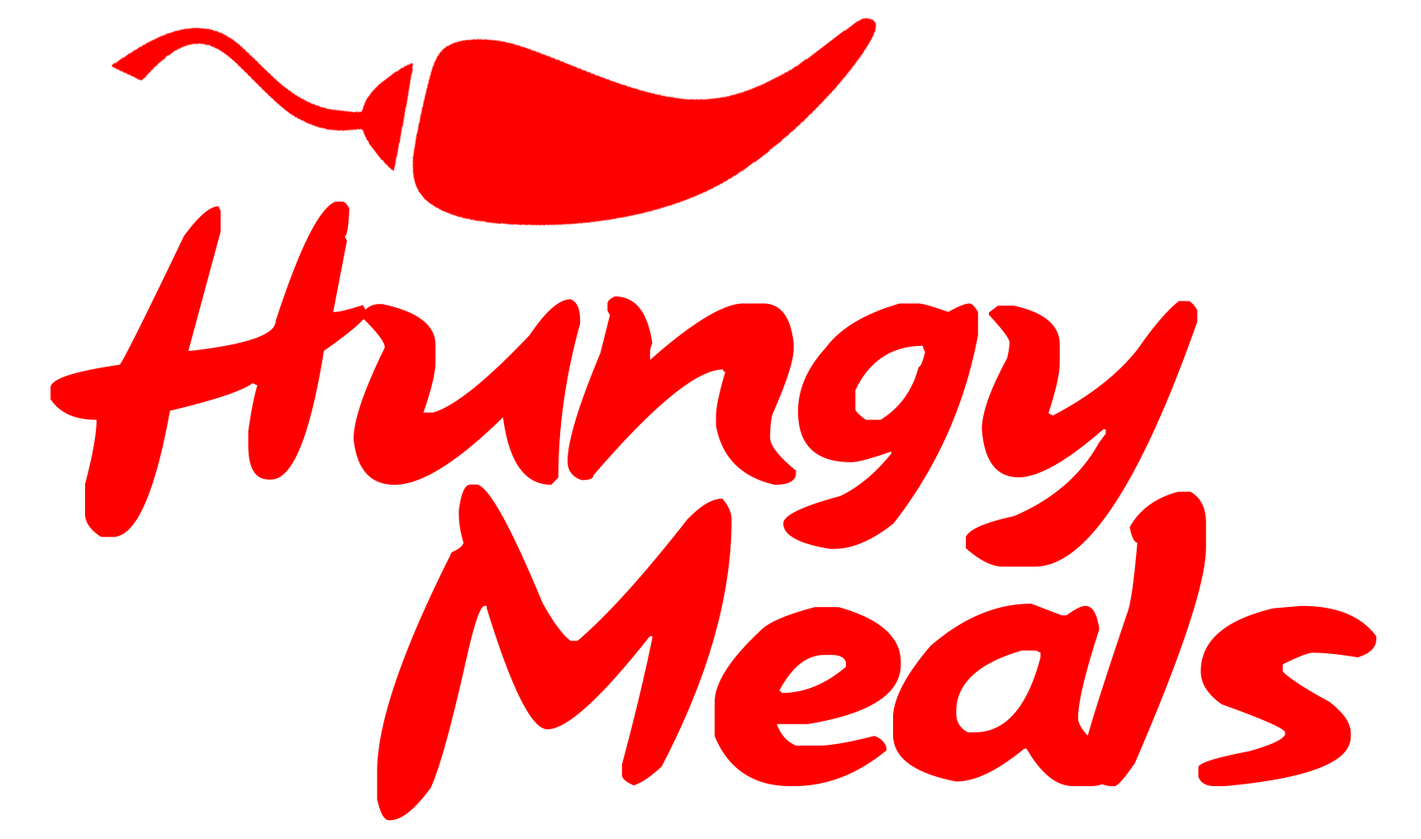
<style>
.page{position:relative;width:1421px;height:839px;background:#ffffff}
.page>*{position:absolute;margin:0}
.t1{font:412.9px "PizzaHutFont";color:#ff0000}
</style>
<div class="page">
<p class="t1" style="left:50px;top:202px;width:1148px;height:365px">Hungy</p>
<p class="t1" style="left:377px;top:484px;width:999px;height:337px">Meals</p>
</div>
